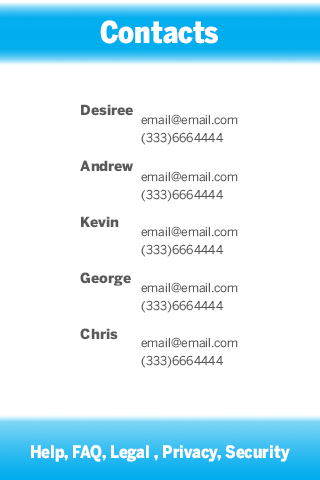
<style>
.page{position:relative;width:320px;height:480px;background:#ffffff}
.page>*{position:absolute;margin:0}
.t1{font:30px "BentonSansCond-Black";color:#ffffff}
.t2{font:14px/28px "BentonSans-Black";color:#595959}
.t3{font:12px/18px "BentonSans-Book";color:#595959}
.t4{font:17.2px "BentonSans-Black";color:#ffffff;scale:0.87 1}
</style>
<div class="page">
<p class="t1" style="left:100px;top:20px;width:118px;height:24px">Contacts</p>
<p class="t2" style="left:80px;top:104px;width:53px;height:236px">Desiree<br><br>Andrew<br><br>Kevin<br><br>George<br><br>Chris</p>
<p class="t3" style="left:141px;top:114px;width:97px;height:31px">email@email.com<br>(333)6664444</p>
<p class="t3" style="left:141px;top:171px;width:97px;height:31px">email@email.com<br>(333)6664444</p>
<p class="t3" style="left:141px;top:226px;width:97px;height:31px">email@email.com<br>(333)6664444</p>
<p class="t3" style="left:141px;top:282px;width:97px;height:31px">email@email.com<br>(333)6664444</p>
<p class="t3" style="left:141px;top:337px;width:97px;height:31px">email@email.com<br>(333)6664444</p>
<p class="t4" style="left:31px;top:445px;width:259px;height:17px">Help, FAQ, Legal , Privacy, Security</p>
</div>
